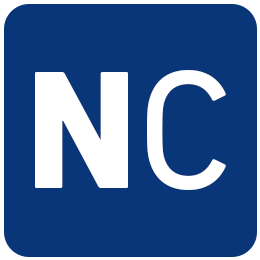
<style>
.page{position:relative;width:260px;height:260px;background:#093579}
.page>*{position:absolute;margin:0}
.t1{font:170px "DINNextLTPro-Heavy";color:#ffffff}
.t2{font:170px "DINNextLTPro-Regular";color:#ffffff}
</style>
<div class="page">
<p class="t1" style="left:35px;top:70px;width:191px;height:120px">N<span class="t2">C</span></p>
</div>
